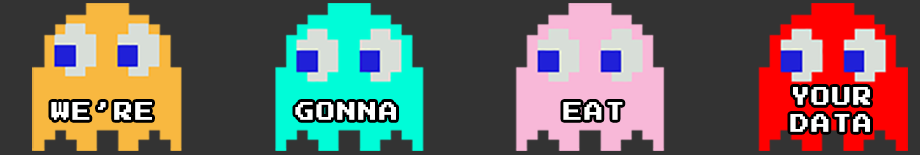
<style>
.page{position:relative;width:920px;height:155px;background:#333333}
.page>*{position:absolute;margin:0}
.t1{font:19.9px/27px "PressStart2P-Regular";letter-spacing:0.1em;color:#ffffff;scale:0.95 1}
.t2{font:19.9px "PressStart2P-Regular";letter-spacing:0.1em;color:#ffffff;scale:0.95 1}
</style>
<div class="page">
<p class="t1" style="left:790px;top:87px;width:80px;height:45px;text-align:justify">YOUR <br>DATA</p>
<p class="t2" style="left:51px;top:102px;width:101px;height:18px">WE’RE</p>
<p class="t2" style="left:295px;top:102px;width:101px;height:18px">GONNA</p>
<p class="t2" style="left:563px;top:102px;width:60px;height:18px">EAT</p>
</div>
